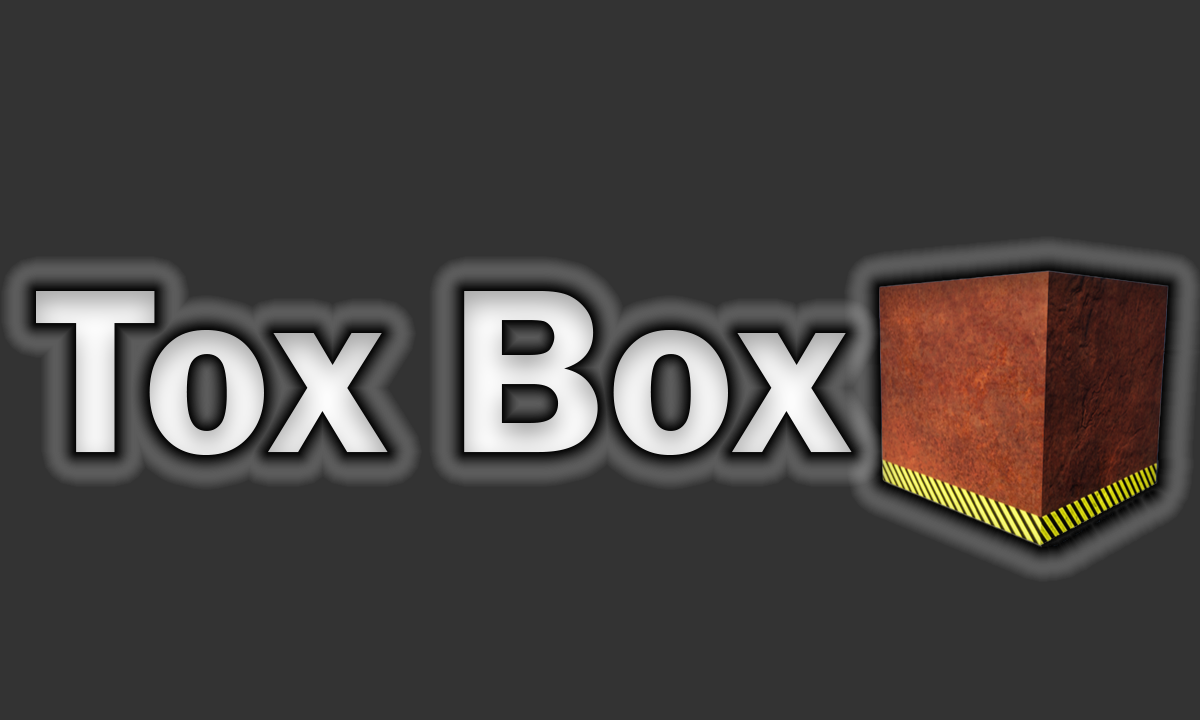
<style>
.page{position:relative;width:1200px;height:720px;background:#333333}
.page>*{position:absolute;margin:0}
.t1{font:242.3px "FranklinGothic-Demi";color:#e4e4e4}
</style>
<div class="page">
<p class="t1" style="left:36px;top:291px;width:816px;height:164px">Tox Box</p>
</div>
